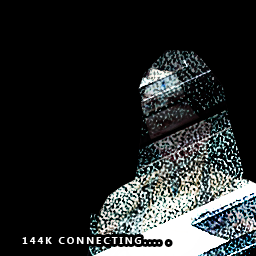
<style>
.page{position:relative;width:256px;height:256px;background:#000000}
.page>*{position:absolute;margin:0}
.t1{font:10px "KhmerUI-Bold";letter-spacing:0.2em;color:#ffffff;text-transform:uppercase}
</style>
<div class="page">
<p class="t1" style="left:22px;top:237px;width:148px;height:7px">144k connecting.... .</p>
</div>
